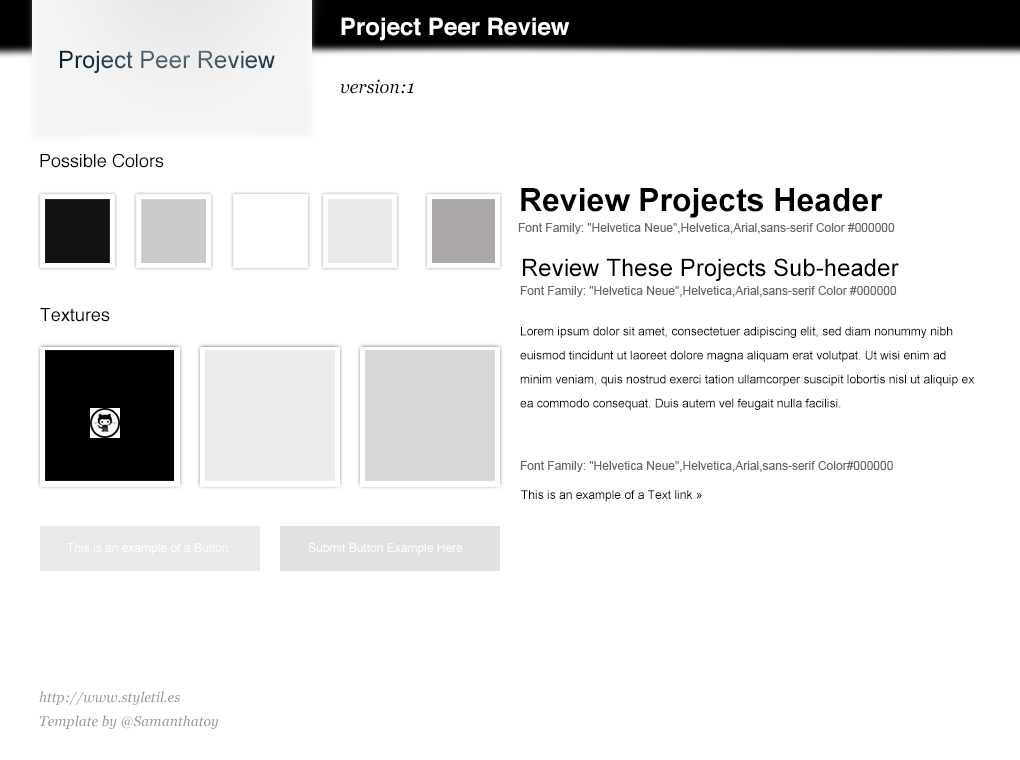
<style>
.page{position:relative;width:1020px;height:760px;background:#ffffff}
.page>*{position:absolute;margin:0}
.t1{font:24px "Helvetica-Bold";color:#ffffff}
.t2{font:24px "ArialMT"}
.t3{font:18px "Georgia-Italic";color:#000000}
.t4{font:18px "Helvetica";color:#000000}
.t5{font:32px "Arial-BoldMT";color:#000000}
.t6{font:12px "ArialMT";color:#666666}
.t7{font:24px "ArialMT";color:#000000}
.t8{font:12px/24px "ArialMT";color:#000000}
.t9{font:12px "ArialMT";color:#000000}
.t10{font:12px "ArialMT";color:#ffffff}
.t11{font:14px/24px "Georgia-Italic";color:#999999}
</style>
<div class="page">
<p class="t1" style="left:341px;top:17px;width:229px;height:24px">Project Peer Review</p>
<p class="t2" style="left:60px;top:50px;width:215px;height:23px">Project Peer Review</p>
<p class="t3" style="left:340px;top:79px;width:74px;height:15px">version:1</p>
<p class="t4" style="left:40px;top:153px;width:124px;height:15px">Possible Colors</p>
<p class="t5" style="left:521px;top:188px;width:362px;height:30px">Review Projects Header</p>
<p class="t6" style="left:518px;top:223px;width:377px;height:11px">Font Family: "Helvetica Neue",Helvetica,Arial,sans-serif Color #000000</p>
<p class="t7" style="left:523px;top:258px;width:376px;height:23px">Review These Projects Sub-header</p>
<p class="t6" style="left:520px;top:286px;width:377px;height:11px">Font Family: "Helvetica Neue",Helvetica,Arial,sans-serif Color #000000</p>
<p class="t4" style="left:40px;top:308px;width:70px;height:14px">Textures</p>
<p class="t8" style="left:520px;top:326px;width:455px;height:84px">Lorem ipsum dolor sit amet, consectetuer adipiscing elit, sed diam nonummy nibh euismod tincidunt ut laoreet dolore magna aliquam erat volutpat. Ut wisi enim ad minim veniam, quis nostrud exerci tation ullamcorper suscipit lobortis nisl ut aliquip ex ea commodo consequat. Duis autem vel feugait nulla facilisi.</p>
<p class="t6" style="left:520px;top:461px;width:373px;height:11px">Font Family: "Helvetica Neue",Helvetica,Arial,sans-serif Color#000000</p>
<p class="t9" style="left:521px;top:490px;width:181px;height:12px">This is an example of a Text link »</p>
<p class="t10" style="left:67px;top:543px;width:161px;height:12px">This is an example of a Button</p>
<p class="t10" style="left:308px;top:543px;width:155px;height:12px">Submit Button Example Here</p>
<p class="t11" style="left:39px;top:691px;width:180px;height:38px">http://www.styletil.es<br>Template by @Samanthatoy</p>
</div>
